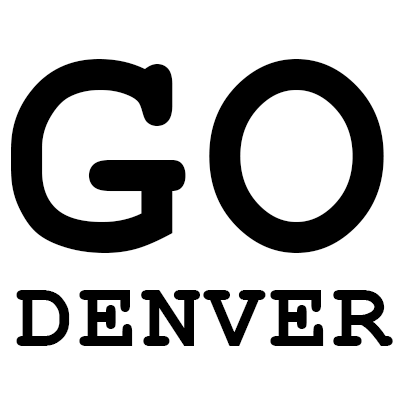
<style>
.page{position:relative;width:400px;height:400px;background:#ffffff}
.page>*{position:absolute;margin:0}
.t1{font:311.4px "CourierNewPS-BoldMT";letter-spacing:0.05em;color:#000000;text-transform:uppercase}
.t2{font:97.6px "CourierNewPS-BoldMT";letter-spacing:0.05em;color:#000000;text-transform:uppercase}
</style>
<div class="page">
<p class="t1" style="left:11px;top:59px;width:373px;height:194px">GO</p>
<p class="t2" style="left:16px;top:290px;width:377px;height:56px">DENVER</p>
</div>
